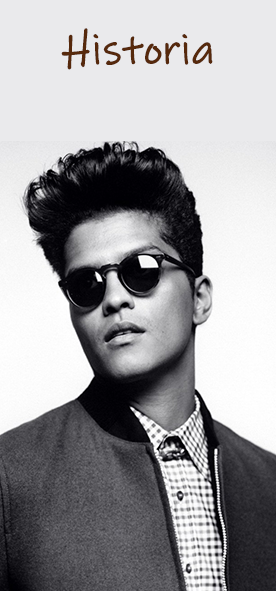
<style>
.page{position:relative;width:276px;height:591px;background:#eaeaec}
.page>*{position:absolute;margin:0}
.t1{font:41.7px "InkFree";color:#56290c;font-weight:bold}
</style>
<div class="page">
<p class="t1" style="left:61px;top:28px;width:152px;height:42px">Historia</p>
</div>
